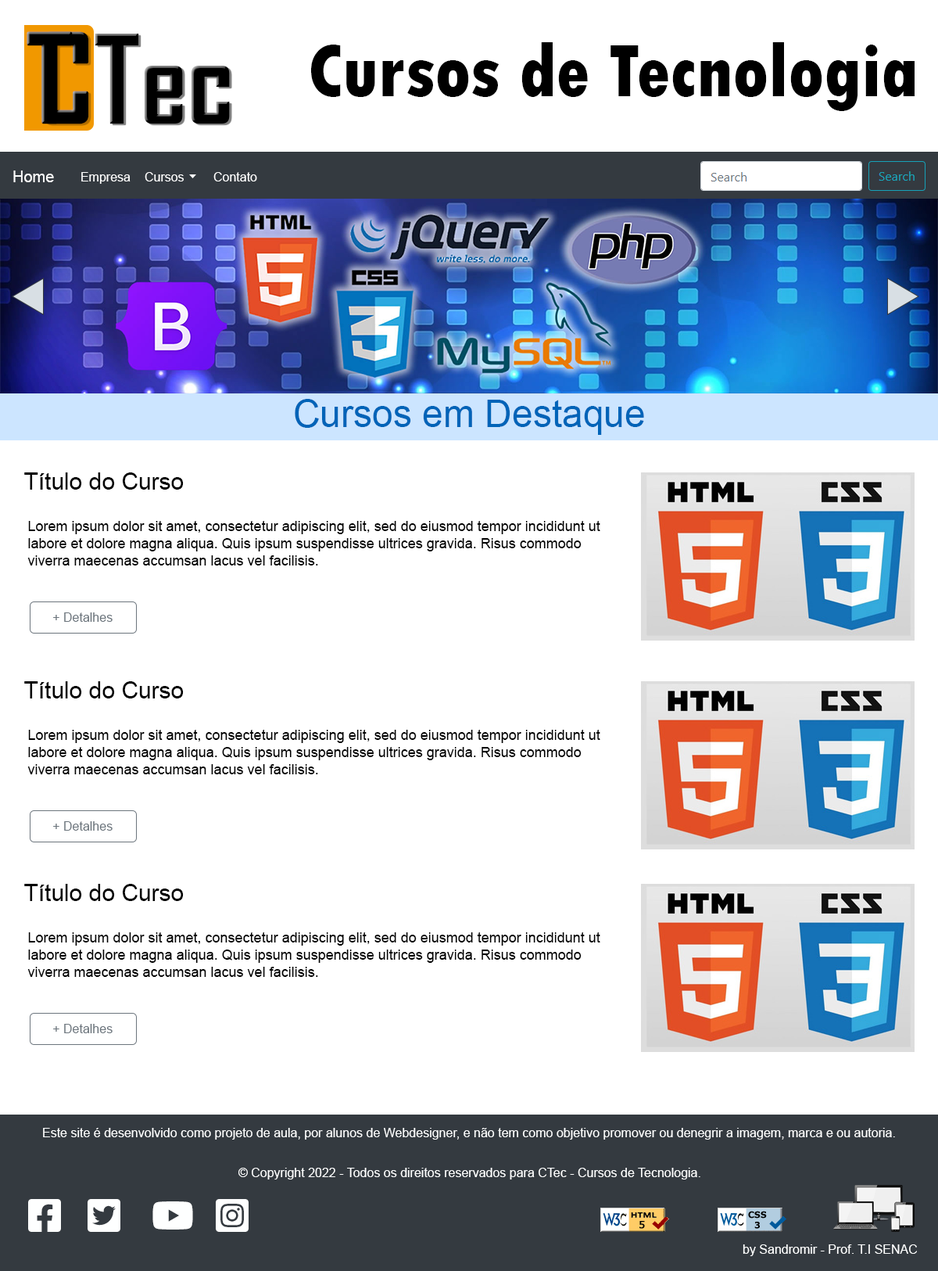
<style>
.page{position:relative;width:938px;height:1271px;background:#ffffff}
.page>*{position:absolute;margin:0}
.t1{font:78.2px "TwCenMT-CondensedExtraBold";color:#000000}
.t2{font:15.6px "ArialMT";color:#ffffff}
.t3{font:12.5px "ArialMT";color:#ffffff}
.t4{font:37.5px "ArialMT";color:#0064b8}
.t5{font:23.5px "ArialMT";color:#000000}
.t6{font:14.1px "ArialMT";color:#000000}
.t7{font:12.5px "ArialMT";color:#6c757d}
.t8{font:12.5px "ArialMT";color:#feffff}
</style>
<div class="page">
<p class="t1" style="left:311px;top:42px;width:604px;height:69px">Cursos de Tecnologia</p>
<p class="t2" style="left:13px;top:170px;width:41px;height:12px">Home</p>
<p class="t3" style="left:81px;top:172px;width:50px;height:12px">Empresa</p>
<p class="t3" style="left:145px;top:172px;width:39px;height:9px">Cursos</p>
<p class="t3" style="left:213px;top:172px;width:44px;height:9px">Contato</p>
<p class="t4" style="left:295px;top:399px;width:349px;height:36px">Cursos em Destaque</p>
<p class="t5" style="left:24px;top:472px;width:160px;height:18px">Título do Curso</p>
<p class="t6" style="left:27px;top:521px;width:574px;height:44px">Lorem ipsum dolor sit amet, consectetur adipiscing elit, sed do eiusmod tempor incididunt ut labore et dolore magna aliqua. Quis ipsum suspendisse ultrices gravida. Risus commodo viverra maecenas accumsan lacus vel facilisis.</p>
<p class="t7" style="left:53px;top:612px;width:60px;height:10px">+ Detalhes</p>
<p class="t5" style="left:24px;top:681px;width:160px;height:17px">Título do Curso</p>
<p class="t6" style="left:27px;top:730px;width:574px;height:44px">Lorem ipsum dolor sit amet, consectetur adipiscing elit, sed do eiusmod tempor incididunt ut labore et dolore magna aliqua. Quis ipsum suspendisse ultrices gravida. Risus commodo viverra maecenas accumsan lacus vel facilisis.</p>
<p class="t7" style="left:53px;top:821px;width:60px;height:9px">+ Detalhes</p>
<p class="t5" style="left:24px;top:884px;width:160px;height:17px">Título do Curso</p>
<p class="t6" style="left:27px;top:932px;width:574px;height:45px">Lorem ipsum dolor sit amet, consectetur adipiscing elit, sed do eiusmod tempor incididunt ut labore et dolore magna aliqua. Quis ipsum suspendisse ultrices gravida. Risus commodo viverra maecenas accumsan lacus vel facilisis.</p>
<p class="t7" style="left:53px;top:1024px;width:60px;height:9px">+ Detalhes</p>
<p class="t8" style="left:43px;top:1128px;width:852px;height:11px">Este site é desenvolvido como projeto de aula, por alunos de Webdesigner, e não tem como objetivo promover ou denegrir a imagem, marca e ou autoria.</p>
<p class="t8" style="left:239px;top:1168px;width:462px;height:11px">© Copyright 2022 - Todos os direitos reservados para CTec - Cursos de Tecnologia.</p>
<p class="t8" style="left:743px;top:1244px;width:174px;height:12px">by Sandromir - Prof. T.I SENAC</p>
</div>
